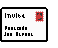
<style>
.page{position:relative;width:58px;height:48px;background:#fbfbfb}
.page>*{position:absolute;margin:0}
.t1{font:12px "BitPotionExt";color:#000000}
.t2{font:8px "BitPotionExt";color:#000000}
</style>
<div class="page">
<p class="t1" style="left:5px;top:13px;width:20px;height:5px">invite</p>
<p class="t2" style="left:5px;top:26px;width:22px;height:4px">Postcode</p>
<p class="t2" style="left:4px;top:32px;width:29px;height:4px">Jos Straat</p>
</div>
